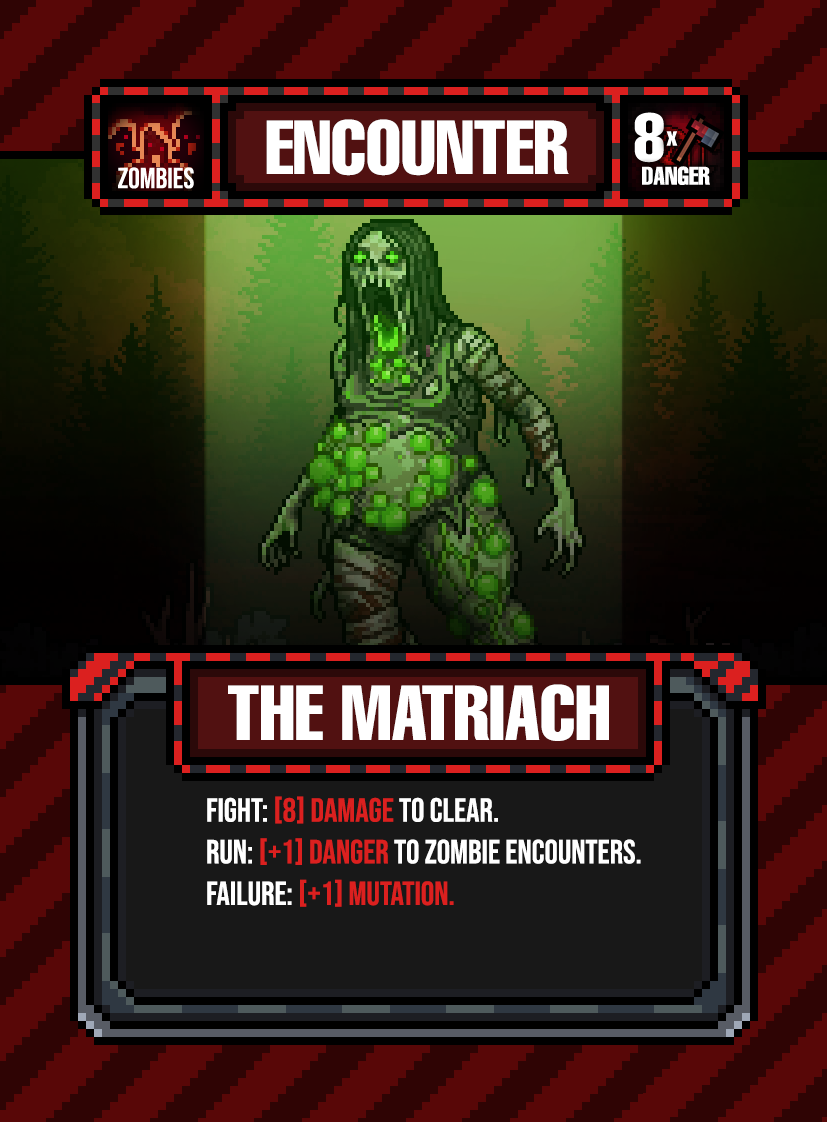
<style>
.page{position:relative;width:827px;height:1122px}
.page>*{position:absolute;margin:0}
.t1{font:75px "HelveticaLTPro-Compressed";color:#ffffff}
.t2{font:76.2px "HelveticaLTPro-Compressed";color:#ffffff}
.t3{font:33.3px/33.3px "BebasNeue-Regular";color:#ffffff}
.t4{font:33.3px/41.7px "BebasNeue-Regular";color:#ffffff}
.t5{font:33.3px/41.7px "BebasNeue-Regular";color:#db201f}
.t6{font:33.3px/33.3px "BebasNeue-Regular";color:#db201f}
</style>
<div class="page">
<p class="t1" style="left:266px;top:119px;width:303px;height:57px">ENCOUNTER</p>
<p class="t2" style="left:228px;top:684px;width:381px;height:57px">THE MATRIACH</p>
<p class="t3" style="left:207px;top:796px;width:434px;height:111px"><span class="t4">FIGHT: </span><span class="t5">[8] Damage</span><span class="t4"> to clear.<br>RUN: </span><span class="t6">[+1] Danger </span>to zombie encounters.<br><span class="t4">failure: </span><span class="t5">[+1] MUTATION.</span></p>
</div>
